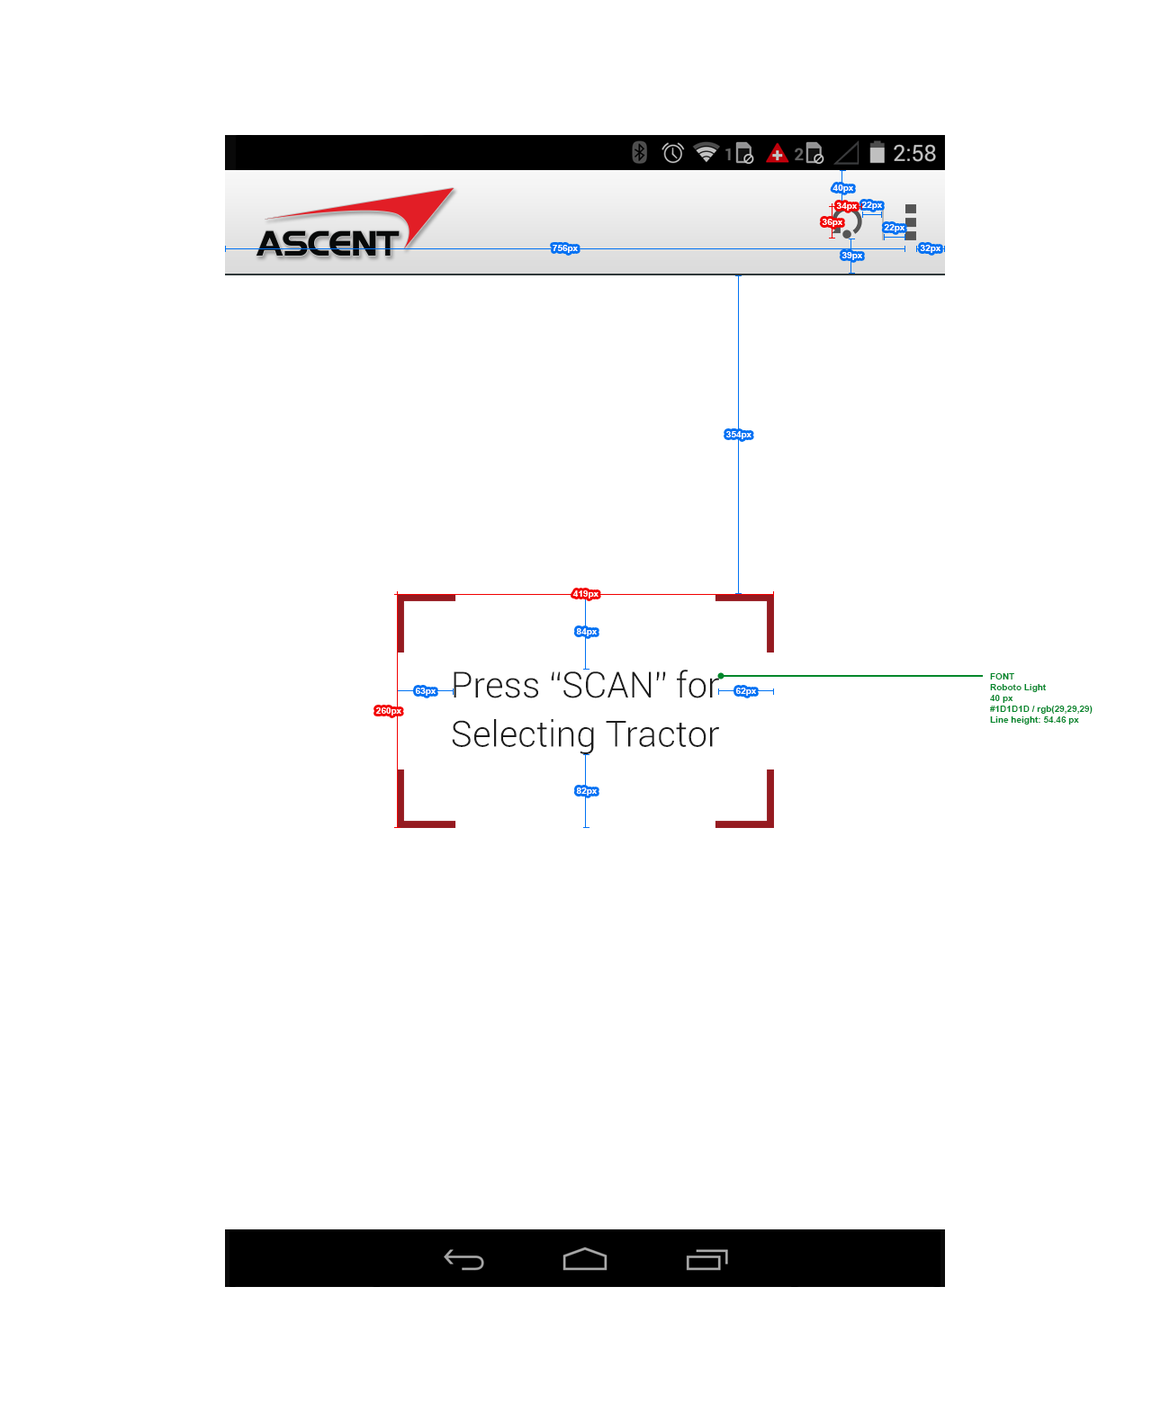
<style>
.page{position:relative;width:1170px;height:1422px;background:#ffffff}
.page>*{position:absolute;margin:0}
.t1{font:9px "Arial-BoldMT";color:#ffffff}
.t2{font:36px/49px "Roboto-Light";color:#1d1d1d}
.t3{font:9px "Arial-BoldMT";color:#00872b}
</style>
<div class="page">
<p class="t1" style="left:832px;top:184px;width:21px;height:9px">40px</p>
<p class="t1" style="left:836px;top:202px;width:21px;height:9px">34px</p>
<p class="t1" style="left:861px;top:202px;width:21px;height:8px">22px</p>
<p class="t1" style="left:822px;top:219px;width:20px;height:8px">36px</p>
<p class="t1" style="left:884px;top:224px;width:20px;height:8px">22px</p>
<p class="t1" style="left:553px;top:245px;width:25px;height:8px">756px</p>
<p class="t1" style="left:920px;top:245px;width:20px;height:8px">32px</p>
<p class="t1" style="left:842px;top:252px;width:20px;height:8px">39px</p>
<p class="t1" style="left:726px;top:431px;width:26px;height:8px">354px</p>
<p class="t1" style="left:572px;top:590px;width:26px;height:8px">419px</p>
<p class="t1" style="left:576px;top:628px;width:21px;height:8px">84px</p>
<p class="t2" style="left:452px;top:670px;width:267px;height:84px;text-align:center">Press “SCAN” for<br>Selecting Tractor</p>
<p class="t3" style="left:990px;top:673px;width:103px;height:51px">FONT <br>Roboto Light<br>40 px<br>#1D1D1D / rgb(29,29,29)<br>Line height: 54.46 px</p>
<p class="t1" style="left:415px;top:688px;width:21px;height:8px">63px</p>
<p class="t1" style="left:735px;top:688px;width:21px;height:8px">62px</p>
<p class="t1" style="left:376px;top:707px;width:25px;height:9px">260px</p>
<p class="t1" style="left:576px;top:788px;width:21px;height:8px">82px</p>
</div>
